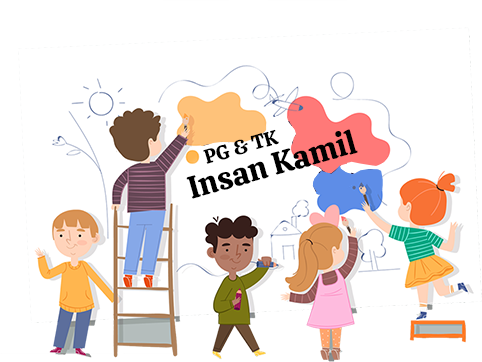
<style>
.page{position:relative;width:482px;height:362px;background:#ffffff}
.page>*{position:absolute;margin:0}
.t1{font:31.7px "Calistoga-Regular";color:#000000}
.t2{font:20.2px "Calistoga-Regular";color:#000000}
</style>
<div class="page">
<p class="t1" style="left:186px;top:129px;width:172px;height:70px;rotate:-16deg">Insan Kamil</p>
<p class="t2" style="left:203px;top:129px;width:76px;height:35px;rotate:-16deg">PG &amp; TK</p>
</div>
